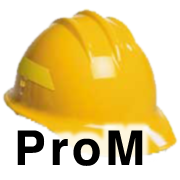
<style>
.page{position:relative;width:180px;height:180px;background:#ffffff}
.page>*{position:absolute;margin:0}
.t1{font:48px "Helvetica-Bold";letter-spacing:0.05em;color:#000000;font-weight:bold}
</style>
<div class="page">
<p class="t1" style="left:17px;top:130px;width:126px;height:36px">ProM</p>
</div>
